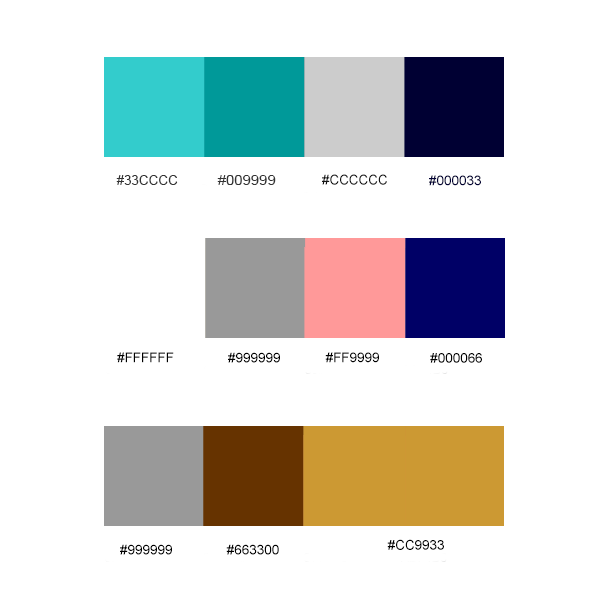
<style>
.page{position:relative;width:600px;height:600px;background:#ffffff}
.page>*{position:absolute;margin:0}
.t1{font:13.4px "ArialMT";color:#131313}
.t2{font:13.4px "ArialMT";color:#333333;text-transform:uppercase}
.t3{font:13.4px "ArialMT";color:#333333;text-transform:uppercase;scale:1.1 1}
.t4{font:13.4px "ArialMT";color:#000033}
.t5{font:13.4px "ArialMT";color:#000000}
</style>
<div class="page">
<p class="t1" style="left:322px;top:174px;width:65px;height:11px">#CCCCCC</p>
<p class="t2" style="left:116px;top:175px;width:62px;height:10px">#33cccc</p>
<p class="t3" style="left:217px;top:175px;width:59px;height:10px">#009999</p>
<p class="t4" style="left:429px;top:175px;width:52px;height:11px">#000033</p>
<p class="t5" style="left:117px;top:352px;width:57px;height:11px">#FFFFFF</p>
<p class="t5" style="left:228px;top:352px;width:52px;height:11px">#999999</p>
<p class="t5" style="left:325px;top:352px;width:54px;height:11px">#FF9999</p>
<p class="t5" style="left:430px;top:353px;width:52px;height:10px">#000066</p>
<p class="t5" style="left:120px;top:544px;width:52px;height:11px">#999999</p>
<p class="t5" style="left:226px;top:544px;width:53px;height:11px">#663300</p>
<p class="t5" style="left:387px;top:539px;width:57px;height:11px">#CC9933</p>
</div>
